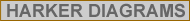
<style>
.page{position:relative;width:190px;height:21px;background:#cccccc}
.page>*{position:absolute;margin:0}
.t1{font:18px "Arial-BoldMT";color:#666666}
</style>
<div class="page">
<p class="t1" style="left:7px;top:3px;width:178px;height:15px">HARKER DIAGRAMS</p>
</div>
